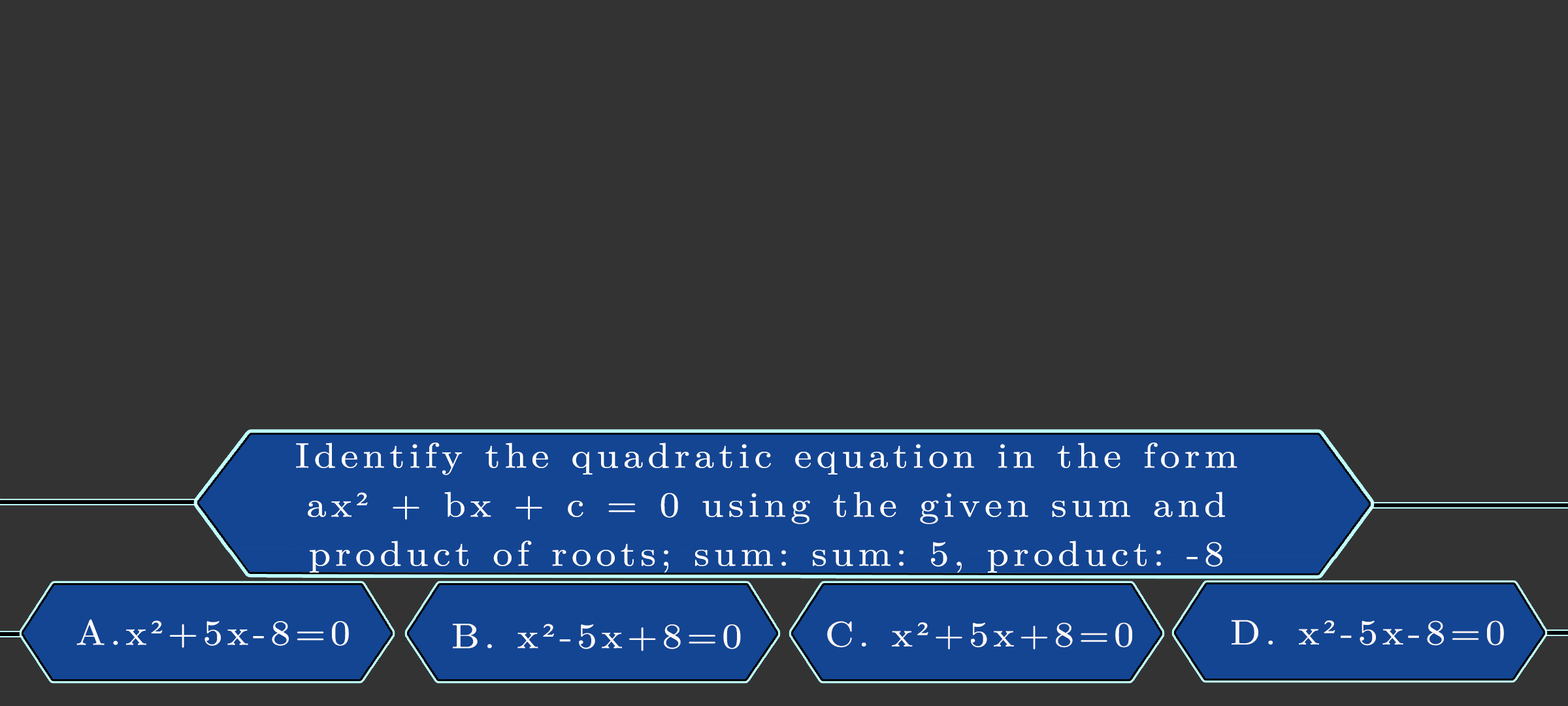
<style>
.page{position:relative;width:1568px;height:706px;background:#333333}
.page>*{position:absolute;margin:0}
.t1{font:35.4px/49px "LatinModernMath-Regular";letter-spacing:0.115em;color:#ffffff;scale:1.12 1}
.t2{font:35.4px/49px "TimesNewRomanPSMT";letter-spacing:0.115em;color:#ffffff;scale:1.12 1}
.t3{font:35.4px "LatinModernMath-Regular";letter-spacing:0.115em;color:#fffefe;scale:1.12 1}
.t4{font:35.4px "LatinModernMath-Regular";letter-spacing:0.115em;color:#fffefe;text-transform:uppercase;scale:1.12 1}
.t5{font:35.4px "TimesNewRomanPSMT";letter-spacing:0.115em;color:#fffefe;scale:1.12 1}
.t6{font:35.4px "LatinModernMath-Regular";letter-spacing:0.115em;color:#fdf9f9;scale:1.12 1}
.t7{font:35.4px "LatinModernMath-Regular";letter-spacing:0.115em;color:#fdf9f9;text-transform:uppercase;scale:1.12 1}
.t8{font:35.4px "TimesNewRomanPSMT";letter-spacing:0.115em;color:#fdf9f9;scale:1.12 1}
.t9{font:35.4px "LatinModernMath-Regular";letter-spacing:0.115em;color:#fcf7f7;scale:1.12 1}
.t10{font:35.4px "LatinModernMath-Regular";letter-spacing:0.115em;color:#fcf7f7;text-transform:uppercase;scale:1.12 1}
.t11{font:35.4px "TimesNewRomanPSMT";letter-spacing:0.115em;color:#fcf7f7;scale:1.12 1}
.t12{font:35.4px "LatinModernMath-Regular";letter-spacing:0.115em;color:#fbf8f8;scale:1.12 1}
.t13{font:35.4px "LatinModernMath-Regular";letter-spacing:0.115em;color:#fbf8f8;text-transform:uppercase;scale:1.12 1}
.t14{font:35.4px "TimesNewRomanPSMT";letter-spacing:0.115em;color:#fbf8f8;scale:1.12 1}
</style>
<div class="page">
<p class="t1" style="left:296px;top:442px;width:941px;height:130px;text-align:center">Identify the quadratic equation in the form<br>ax<span class="t2">²</span> + bx + c = 0 using the given sum and<br>product of roots; sum: sum: 5, product: -8</p>
<p class="t3" style="left:76px;top:619px;width:273px;height:28px"><span class="t4">a.</span>x<span class="t5">²</span>+5x-8=0</p>
<p class="t6" style="left:453px;top:623px;width:288px;height:28px"><span class="t7">b. </span>x<span class="t8">²</span>-5x+8=0</p>
<p class="t9" style="left:827px;top:621px;width:305px;height:28px"><span class="t10">c. </span>x<span class="t11">²</span>+5x+8=0</p>
<p class="t12" style="left:1232px;top:619px;width:272px;height:26px"><span class="t13">d. </span>x<span class="t14">²</span>-5x-8=0</p>
</div>
